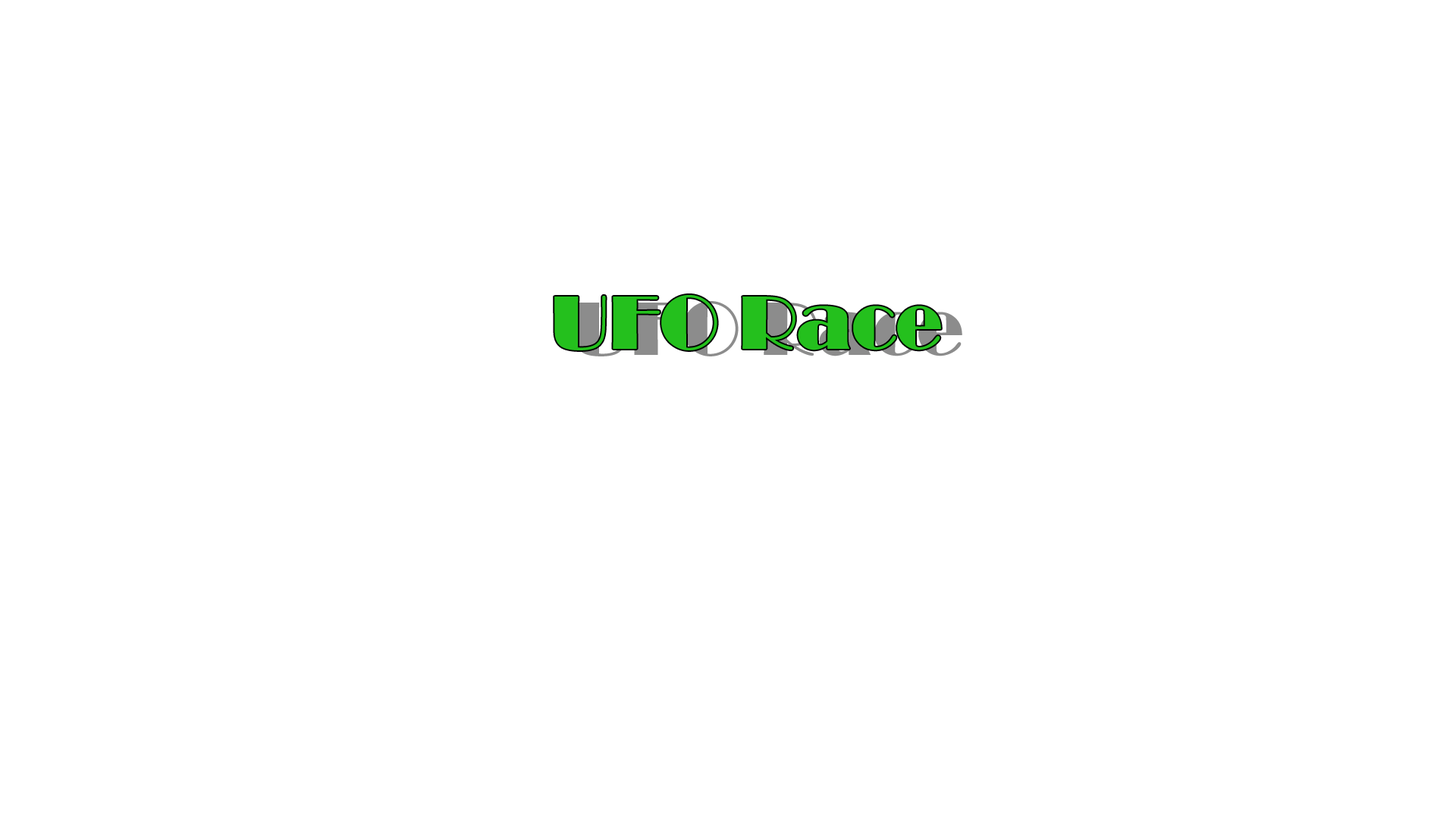
<style>
.page{position:relative;width:1456px;height:819px;background:#ffffff}
.page>*{position:absolute;margin:0}
.t1{font:78.1px "Broadway";color:#24c01d}
</style>
<div class="page">
<p class="t1" style="left:554px;top:295px;width:387px;height:55px">UFO Race</p>
</div>
